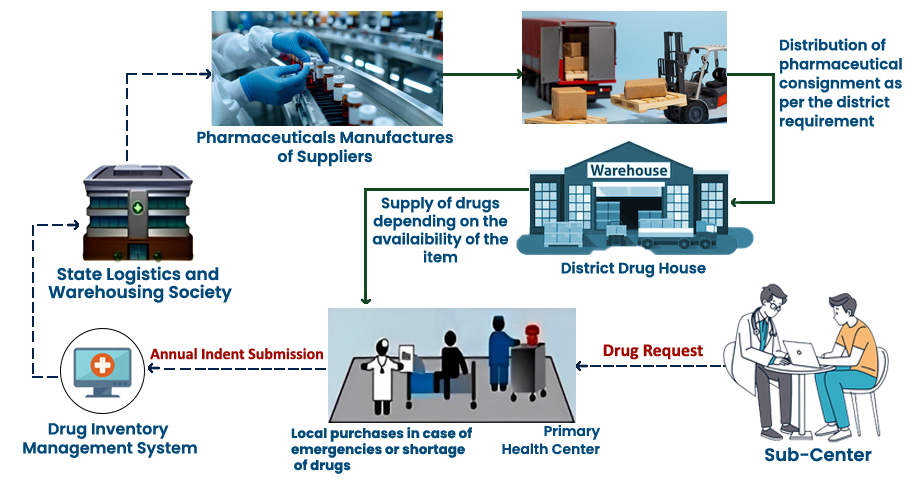
<style>
.page{position:relative;width:924px;height:480px;background:#ffffff}
.page>*{position:absolute;margin:0}
.t1{font:15px/19px "Poppins-SemiBold";color:#004979}
.t2{font:16px/19px "Poppins-SemiBold";color:#004979}
.t3{font:15px/18px "Poppins-SemiBold";color:#004979}
.t4{font:17px/18px "Poppins-SemiBold";color:#004979}
.t5{font:15px "Poppins-SemiBold";color:#004979}
.t6{font:16px "Calibri-Bold";color:#9f0600}
.t7{font:18px "Calibri-Bold";color:#9f0600}
.t8{font:14px/18px "Poppins-SemiBold";color:#004979}
.t9{font:13.5px/16px "Poppins-Bold";color:#004979}
.t10{font:18px "Poppins-SemiBold";color:#004979}
</style>
<div class="page">
<p class="t1" style="left:779px;top:38px;width:123px;height:93px">Distribution of pharmaceutical consignment as per the district requirement</p>
<p class="t2" style="left:197px;top:130px;width:256px;height:37px;text-align:center">Pharmaceuticals Manufactures<br>of Suppliers</p>
<p class="t3" style="left:372px;top:196px;width:137px;height:67px;text-align:center">Supply of drugs<br>depending on the availaibility of the item</p>
<p class="t4" style="left:48px;top:266px;width:184px;height:37px;text-align:center">State Logistics and<br> Warehousing Society</p>
<p class="t5" style="left:561px;top:261px;width:145px;height:17px">District Drug House</p>
<p class="t6" style="left:150px;top:348px;width:173px;height:12px">Annual Indent Submission</p>
<p class="t7" style="left:603px;top:344px;width:100px;height:16px">Drug Request</p>
<p class="t2" style="left:23px;top:423px;width:174px;height:35px;text-align:center">Drug Inventory <br>Management System</p>
<p class="t8" style="left:502px;top:425px;width:98px;height:30px;text-align:right">Primary<br> Health Center</p>
<p class="t9" style="left:291px;top:427px;width:181px;height:47px">Local purchases in case of <br>emergencies or shortage<br> of drugs</p>
<p class="t10" style="left:765px;top:447px;width:107px;height:15px">Sub-Center</p>
</div>
